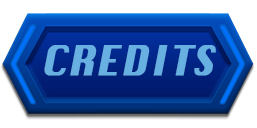
<style>
.page{position:relative;width:257px;height:128px;background:#ffffff}
.page>*{position:absolute;margin:0}
.t1{font:39.9px "Silom";color:#67b0e1;font-weight:bold;font-style:italic}
</style>
<div class="page">
<p class="t1" style="left:44px;top:45px;width:172px;height:31px">CREDITS</p>
</div>
